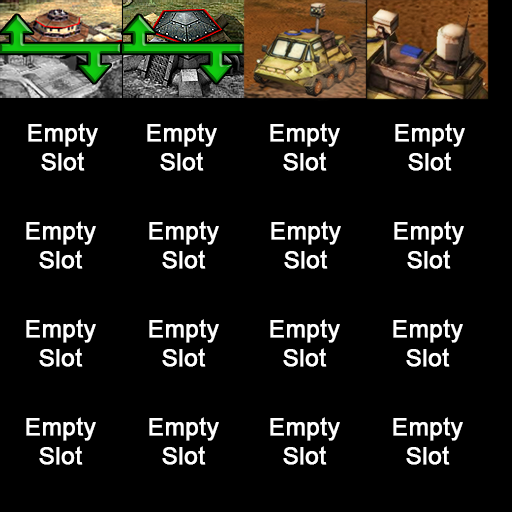
<style>
.page{position:relative;width:512px;height:512px;background:#000000}
.page>*{position:absolute;margin:0}
.t1{font:24px "ArialMT";color:#ffffff;font-weight:bold}
</style>
<div class="page">
<p class="t1" style="left:28px;top:123px;width:70px;height:48px;text-align:center">Empty<br>Slot</p>
<p class="t1" style="left:147px;top:123px;width:70px;height:48px;text-align:center">Empty<br>Slot</p>
<p class="t1" style="left:270px;top:123px;width:70px;height:48px;text-align:center">Empty<br>Slot</p>
<p class="t1" style="left:395px;top:123px;width:70px;height:48px;text-align:center">Empty<br>Slot</p>
<p class="t1" style="left:26px;top:221px;width:70px;height:48px;text-align:center">Empty<br>Slot</p>
<p class="t1" style="left:149px;top:221px;width:70px;height:48px;text-align:center">Empty<br>Slot</p>
<p class="t1" style="left:271px;top:221px;width:70px;height:48px;text-align:center">Empty<br>Slot</p>
<p class="t1" style="left:394px;top:221px;width:70px;height:48px;text-align:center">Empty<br>Slot</p>
<p class="t1" style="left:26px;top:319px;width:70px;height:48px;text-align:center">Empty<br>Slot</p>
<p class="t1" style="left:149px;top:319px;width:70px;height:48px;text-align:center">Empty<br>Slot</p>
<p class="t1" style="left:270px;top:319px;width:70px;height:48px;text-align:center">Empty<br>Slot</p>
<p class="t1" style="left:393px;top:319px;width:70px;height:48px;text-align:center">Empty<br>Slot</p>
<p class="t1" style="left:26px;top:417px;width:70px;height:48px;text-align:center">Empty<br>Slot</p>
<p class="t1" style="left:149px;top:417px;width:70px;height:48px;text-align:center">Empty<br>Slot</p>
<p class="t1" style="left:270px;top:417px;width:70px;height:48px;text-align:center">Empty<br>Slot</p>
<p class="t1" style="left:393px;top:417px;width:70px;height:48px;text-align:center">Empty<br>Slot</p>
</div>
